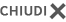
<style>
.page{position:relative;width:66px;height:22px;background:#ffffff}
.page>*{position:absolute;margin:0}
.t1{font:13px "TrebuchetMS";letter-spacing:0.02em;color:#575757;font-weight:bold;scale:1.1 1}
</style>
<div class="page">
<p class="t1" style="left:0px;top:6px;width:47px;height:10px">CHIUDI</p>
</div>
